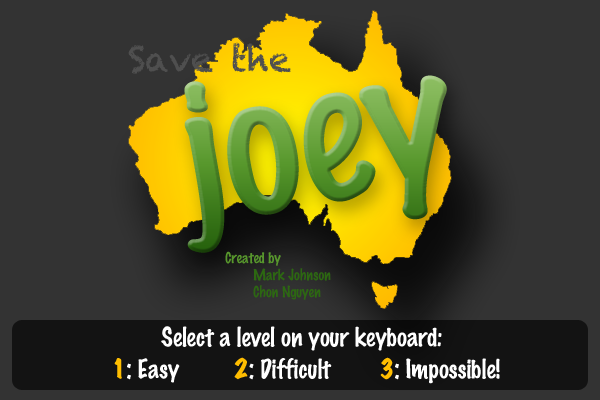
<style>
.page{position:relative;width:600px;height:400px;background:#333333}
.page>*{position:absolute;margin:0}
.t1{font:35.2px "Chalkduster";color:#4f4f4f}
.t2{font:183.9px "MarkerFelt-Thin"}
.t3{font:14px "MarkerFelt-Thin";color:#57972c}
.t4{font:14px "MarkerFelt-Thin";color:#2c6911}
.t5{font:24px "MarkerFelt-Thin";color:#ffffff}
.t6{font:24px "MarkerFelt-Wide";color:#ffbe00}
.t7{font:24px "MarkerFelt-Wide";color:#ffffff}
.t8{font:24px "MarkerFelt-Wide";color:#ffbd00}
</style>
<div class="page">
<p class="t1" style="left:128px;top:42px;width:163px;height:32px">Save the</p>
<p class="t2" style="left:184px;top:75px;width:263px;height:178px;rotate:-10deg">joey</p>
<p class="t3" style="left:225px;top:251px;width:56px;height:15px">Created by</p>
<p class="t4" style="left:253px;top:268px;width:78px;height:32px">Mark Johnson<br>Chon Nguyen</p>
<p class="t5" style="left:161px;top:326px;width:281px;height:25px">Select a level on your keyboard:</p>
<p class="t5" style="left:114px;top:357px;width:386px;height:27px"><span class="t6">1</span><span class="t7">:</span> Easy         <span class="t8">2</span><span class="t7">: </span>Difficult        <span class="t6">3</span><span class="t7">:</span> Impossible!</p>
</div>
